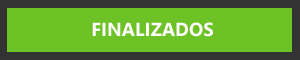
<style>
.page{position:relative;width:300px;height:60px;background:#6dc225}
.page>*{position:absolute;margin:0}
.t1{font:18.8px "SegoeUI-Bold";color:#fdfbfb}
</style>
<div class="page">
<p class="t1" style="left:92px;top:22px;width:121px;height:15px">FINALIZADOS</p>
</div>
